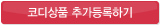
<style>
.page{position:relative;width:160px;height:25px;background:#d33145}
.page>*{position:absolute;margin:0}
.t1{font:12.1px "YDIYGO330";color:#ffffff;scale:0.91 1}
</style>
<div class="page">
<p class="t1" style="left:27px;top:7px;width:105px;height:11px">코디상품 추가등록하기</p>
</div>
